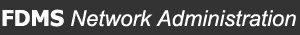
<style>
.page{position:relative;width:300px;height:35px;background:#333333}
.page>*{position:absolute;margin:0}
.t1{font:22px "Arial-ItalicMT";color:#ffffff}
.t2{font:22px "Tahoma-Bold";color:#ffffff}
</style>
<div class="page">
<p class="t1" style="left:2px;top:9px;width:294px;height:18px"><span class="t2">FDMS </span>Network Administration</p>
</div>
